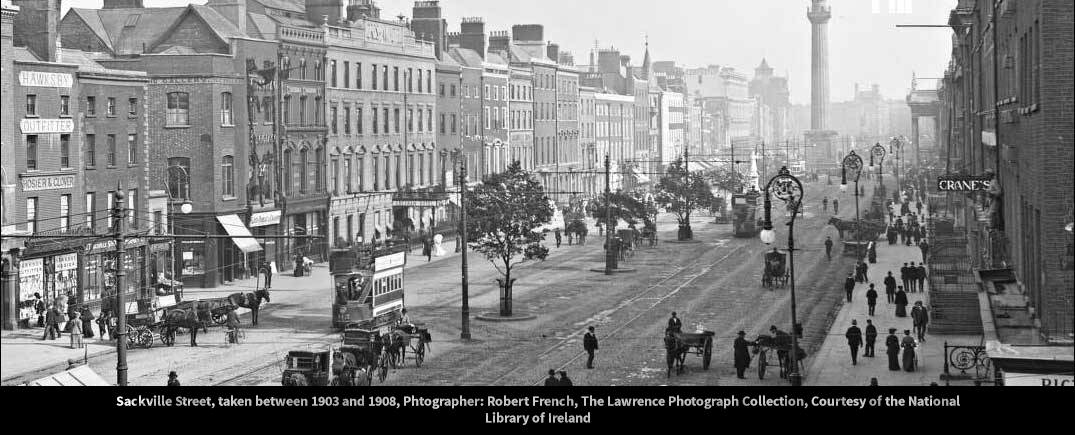
<style>
.page{position:relative;width:1075px;height:435px}
.page>*{position:absolute;margin:0}
.t1{font:14px "SourceSansPro-Bold";color:#c1c1c1}
</style>
<div class="page">
<p class="t1" style="left:116px;top:395px;width:844px;height:30px;text-align:center">Sackville Street, taken between 1903 and 1908, Phtographer: Robert French, The Lawrence Photograph Collection, Courtesy of the National Library of Ireland</p>
</div>
